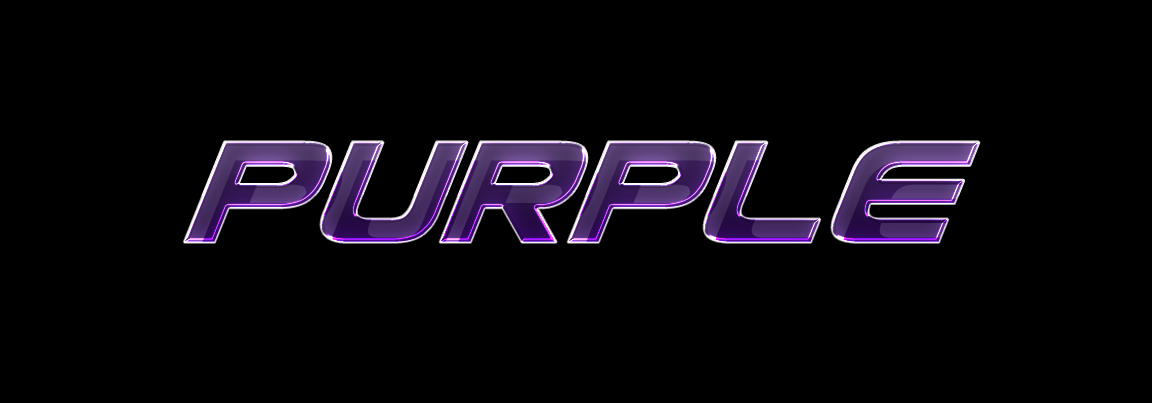
<style>
.page{position:relative;width:1152px;height:403px;background:#000000}
.page>*{position:absolute;margin:0}
.t1{font:172px "UsuziItalic";letter-spacing:-0.025em;font-weight:bold}
</style>
<div class="page">
<p class="t1" style="left:183px;top:141px;width:797px;height:102px">Purple</p>
<p class="t1" style="left:183px;top:141px;width:797px;height:102px">Purple</p>
<p class="t1" style="left:183px;top:141px;width:797px;height:102px">Purple</p>
</div>
